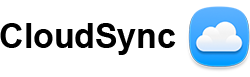
<style>
.page{position:relative;width:250px;height:77px;background:#ffffff}
.page>*{position:absolute;margin:0}
.t1{font:33.6px "Arial-BoldMT";color:#000000}
</style>
<div class="page">
<p class="t1" style="left:0px;top:23px;width:176px;height:32px">CloudSync</p>
</div>
